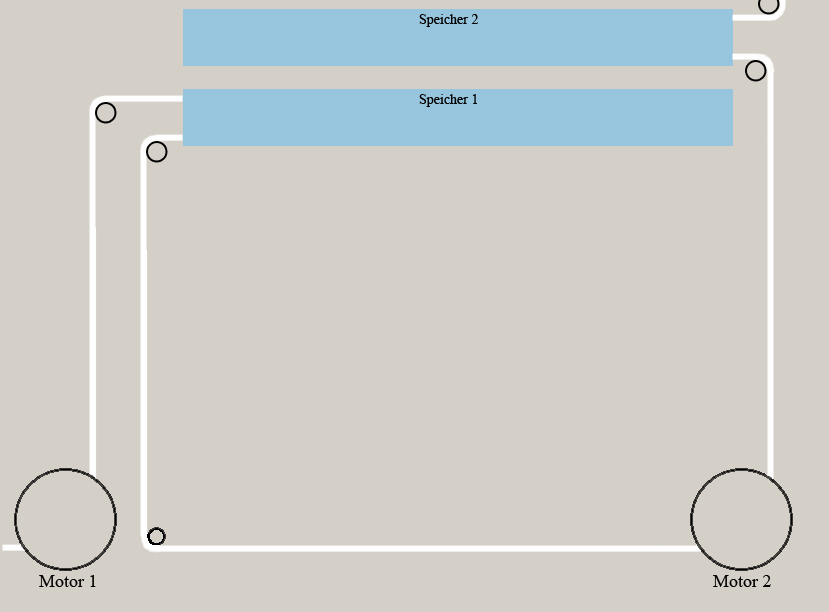
<style>
.page{position:relative;width:829px;height:612px;background:#d4d0c7}
.page>*{position:absolute;margin:0}
.t1{font:14px "TimesNewRomanPSMT";color:#000000}
.t2{font:18px "TimesNewRomanPSMT";color:#000000}
</style>
<div class="page">
<p class="t1" style="left:419px;top:14px;width:59px;height:13px">Speicher 2</p>
<p class="t1" style="left:419px;top:94px;width:58px;height:13px">Speicher 1</p>
<p class="t2" style="left:39px;top:575px;width:57px;height:12px">Motor 1</p>
<p class="t2" style="left:713px;top:575px;width:58px;height:12px">Motor 2</p>
</div>
